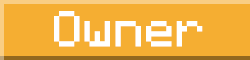
<style>
.page{position:relative;width:250px;height:60px;background:#f5ae32}
.page>*{position:absolute;margin:0}
.t1{font:40.4px "Minecraft";letter-spacing:0.02em;color:#ffffff}
</style>
<div class="page">
<p class="t1" style="left:54px;top:11px;width:149px;height:36px">Owner</p>
</div>
